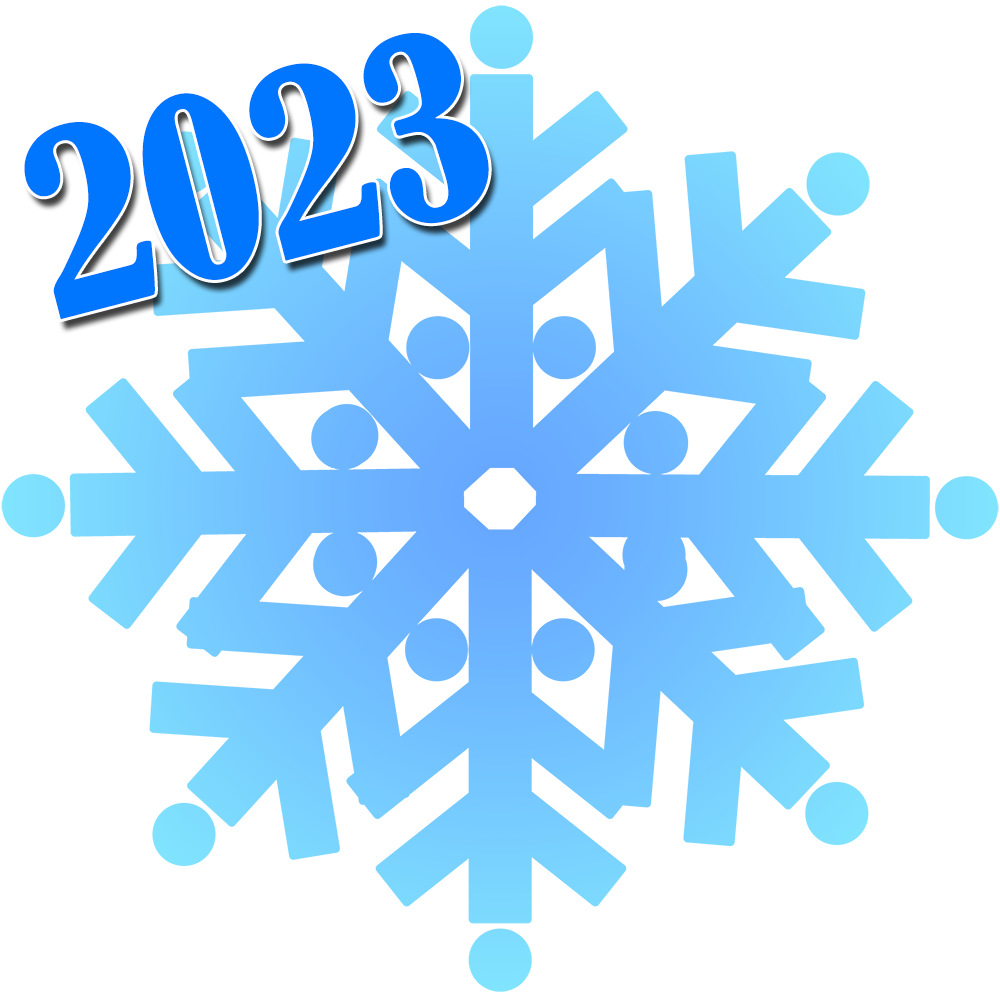
<style>
.page{position:relative;width:1000px;height:1000px;background:#ffffff}
.page>*{position:absolute;margin:0}
.t1{font:237.2px "BernardMT-Condensed";color:#0076ff}
</style>
<div class="page">
<p class="t1" style="left:24px;top:33px;width:465px;height:287px;rotate:-15deg">2023</p>
</div>
